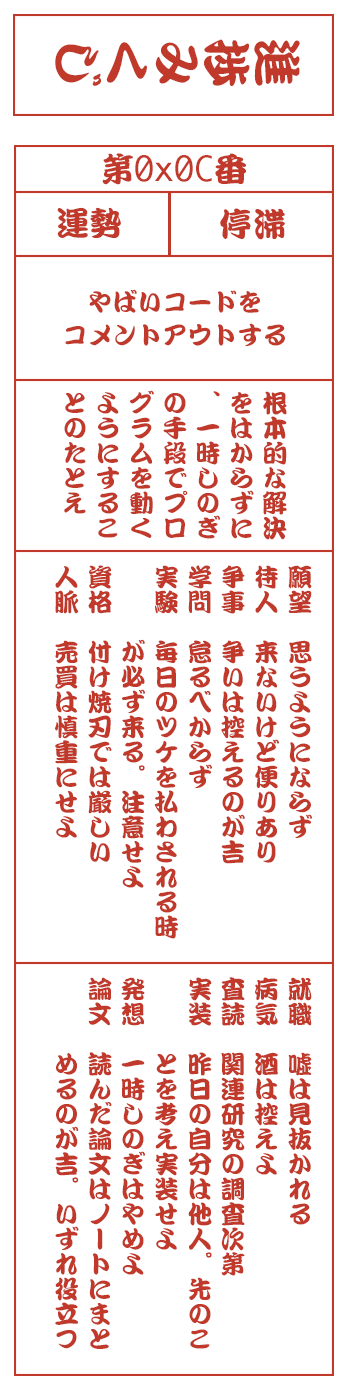
<style>
.page{position:relative;width:350px;height:1400px;background:#ffffff}
.page>*{position:absolute;margin:0}
.t1{font:50px "DFKanTeiRyu-XB-MP-RKSJ-H";color:#c0392b}
.t2{font:33.3px "Monaco";color:#c0392b}
.t3{font:33.3px "DFKanTeiRyu-XB-MP-RKSJ-H";color:#c0392b}
.t4{font:25px/33.3px "DFKanTeiRyu-XB-MP-RKSJ-H";color:#c0392b}
</style>
<div class="page">
<p class="t1" style="left:55px;top:39px;width:245px;height:47px;rotate:90deg">進捗みくじ</p>
<p class="t2" style="left:102px;top:153px;width:144px;height:32px"><span class="t3">第</span>0x0C<span class="t3">番</span></p>
<p class="t3" style="left:57px;top:207px;width:64px;height:31px">運勢</p>
<p class="t3" style="left:220px;top:208px;width:65px;height:32px">停滞</p>
<p class="t4" style="left:65px;top:289px;width:220px;height:57px;text-align:center">やばいコードを<br>コメントアウトする</p>
<p class="t4" style="left:64px;top:390px;width:223px;height:150px">根本的な解決<br>をはからずに<br>、一時しのぎ<br>の手段でプロ<br>グラムを動く<br>ようにするこ<br>とのたとえ</p>
<p class="t4" style="left:55px;top:565px;width:257px;height:374px">願望　思うようにならず<br>待人　来ないけど便りあり<br>争事　争いは控えるのが吉<br>学問　怠るべからず<br>実験　毎日のツケを払わされる時<br>　　　が必ず来る。注意せよ<br>資格　付け焼刃では厳しい<br>人脈　売買は慎重にせよ</p>
<p class="t4" style="left:55px;top:977px;width:257px;height:372px">就職　嘘は見抜かれる<br>病気　酒は控えよ<br>査読　関連研究の調査次第<br>実装　昨日の自分は他人。先のこ<br>　　　とを考え実装せよ<br>発想　一時しのぎはやめよ<br>論文　読んだ論文はノートにまと<br>　　　めるのが吉。いずれ役立つ</p>
</div>
